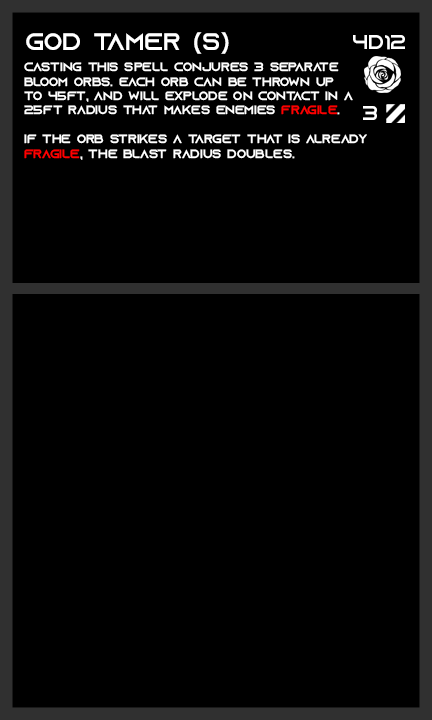
<style>
.page{position:relative;width:432px;height:720px;background:#000000}
.page>*{position:absolute;margin:0}
.t1{font:24px "AzonixRegular";color:#ffffff}
.t2{font:20px "AzonixRegular";color:#ffffff}
.t3{font:12px "AzonixRegular";color:#ffffff}
.t4{font:12px "AzonixRegular";color:#ff0000}
</style>
<div class="page">
<p class="t1" style="left:26px;top:32px;width:203px;height:22px">god tamer (s)</p>
<p class="t2" style="left:353px;top:35px;width:52px;height:15px">4d12</p>
<p class="t3" style="left:24px;top:62px;width:343px;height:98px">casting this spell conjures 3 separate<br>bloom orbs. each orb can be thrown up<br>to 45ft, and will explode on contact in a <br>25ft radius that makes enemies <span class="t4">fragile</span>.<br><br>if the orb strikes a target that is already <br><span class="t4">fragile</span>, the blast radius doubles.</p>
<p class="t2" style="left:363px;top:106px;width:14px;height:14px">3</p>
</div>
